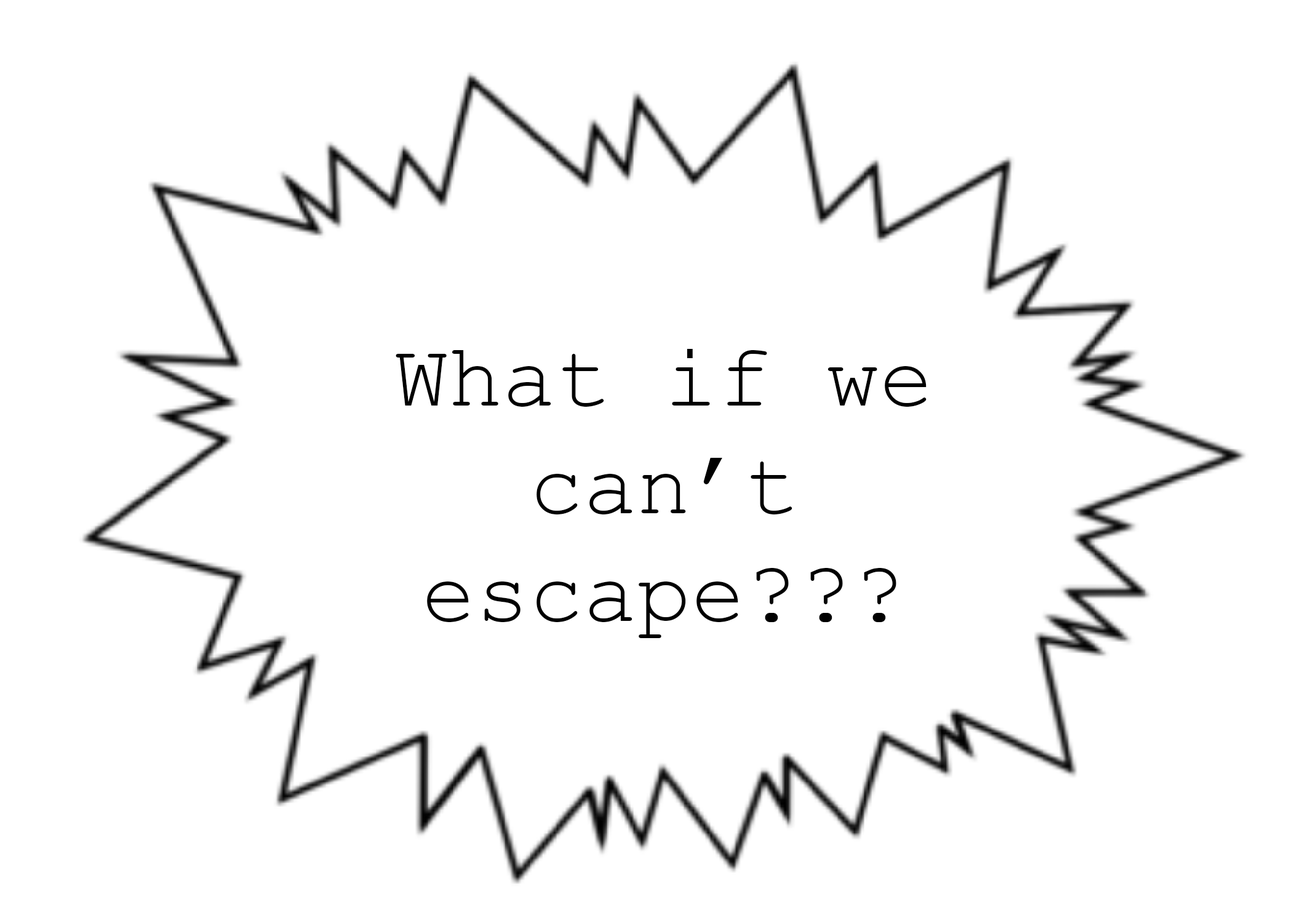
<style>
.page{position:relative;width:1292px;height:923px;background:#ffffff}
.page>*{position:absolute;margin:0}
.t1{font:89.7px "CourierNewPSMT";color:#000000}
</style>
<div class="page">
<p class="t1" style="left:396px;top:349px;width:531px;height:289px;text-align:center">What if we can’t escape???</p>
</div>
